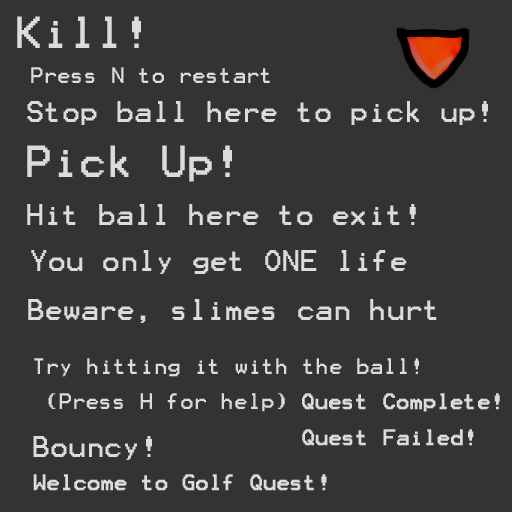
<style>
.page{position:relative;width:512px;height:512px;background:#333333}
.page>*{position:absolute;margin:0}
.t1{font:36px "Terminal";color:#dcdcdc}
.t2{font:18px "Terminal";color:#dcdcdc}
.t3{font:24px "Terminal";color:#dcdcdc}
.t4{font:18px "Terminal";color:#dcdcdc;font-weight:bold}
</style>
<div class="page">
<p class="t1" style="left:17px;top:16px;width:124px;height:32px">Kill!</p>
<p class="t2" style="left:31px;top:67px;width:239px;height:16px">Press N to restart</p>
<p class="t3" style="left:27px;top:101px;width:461px;height:24px">Stop ball here to pick up!</p>
<p class="t1" style="left:27px;top:145px;width:205px;height:37px">Pick Up!</p>
<p class="t3" style="left:27px;top:204px;width:389px;height:21px">Hit ball here to exit!</p>
<p class="t3" style="left:31px;top:250px;width:376px;height:24px">You only get ONE life</p>
<p class="t3" style="left:28px;top:299px;width:409px;height:24px">Beware, slimes can hurt</p>
<p class="t2" style="left:34px;top:358px;width:385px;height:19px">Try hitting it with the ball!</p>
<p class="t2" style="left:48px;top:393px;width:237px;height:19px">(Press H for help)</p>
<p class="t4" style="left:302px;top:393px;width:198px;height:19px">Quest Complete!</p>
<p class="t3" style="left:33px;top:436px;width:119px;height:24px">Bouncy!</p>
<p class="t4" style="left:302px;top:429px;width:172px;height:17px">Quest Failed!</p>
<p class="t4" style="left:33px;top:474px;width:294px;height:17px">Welcome to Golf Quest!</p>
</div>
